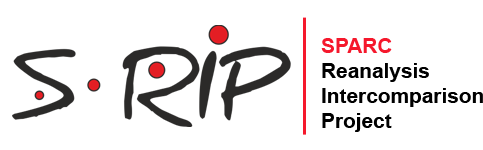
<style>
.page{position:relative;width:483px;height:150px;background:#ffffff}
.page>*{position:absolute;margin:0}
.t1{font:20.8px "Arial-BoldMT";color:#000000}
.t2{font:20.8px "Arial-BoldMT";color:#f5182c}
</style>
<div class="page">
<p class="t1" style="left:321px;top:38px;width:162px;height:94px"><span class="t2">SPARC<br></span>Reanalysis<br>Intercomparison<br>Project</p>
</div>
